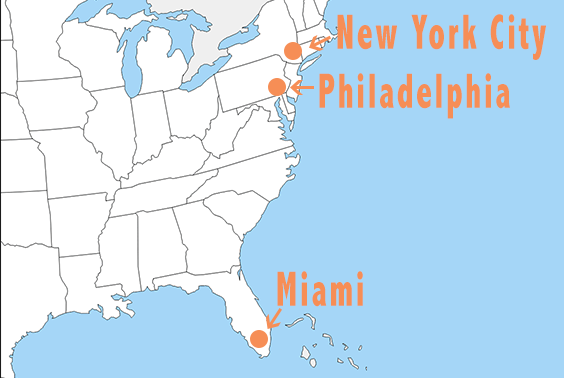
<style>
.page{position:relative;width:564px;height:378px;background:#a5d6f7}
.page>*{position:absolute;margin:0}
.t1{font:50px "AbadiMT-CondensedExtraBold";letter-spacing:0.075em;color:#f68e56;scale:0.68 1}
</style>
<div class="page">
<p class="t1" style="left:337px;top:14px;width:209px;height:46px">New York City</p>
<p class="t1" style="left:319px;top:73px;width:191px;height:46px">Philadelphia</p>
<p class="t1" style="left:277px;top:271px;width:86px;height:36px">Miami</p>
</div>
